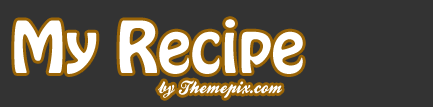
<style>
.page{position:relative;width:433px;height:107px;background:#333333}
.page>*{position:absolute;margin:0}
.t1{font:63px "HoboStd";color:#ffffff}
.t2{font:18px "BallparkWeiner";letter-spacing:0.025em;color:#ffffff}
</style>
<div class="page">
<p class="t1" style="left:14px;top:19px;width:289px;height:55px">My Recipe</p>
<p class="t2" style="left:158px;top:80px;width:124px;height:18px">by Themepix.com</p>
</div>
